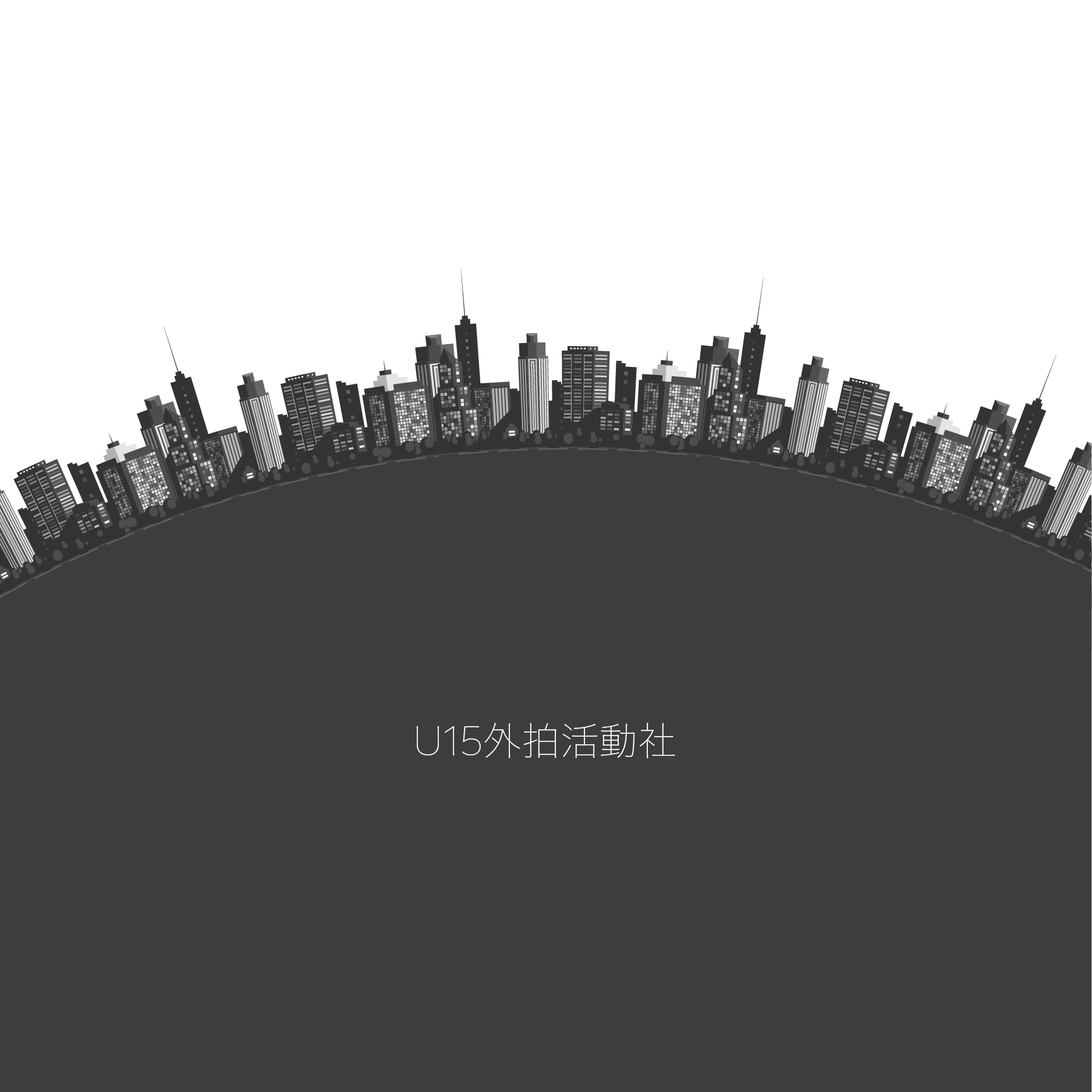
<style>
.page{position:relative;width:1092px;height:1092px;background:#3d3d3d}
.page>*{position:absolute;margin:0}
.t1{font:38.8px "HiraginoSans-W0";color:#ffffff}
</style>
<div class="page">
<p class="t1" style="left:416px;top:723px;width:259px;height:35px">U15外拍活動社</p>
</div>
